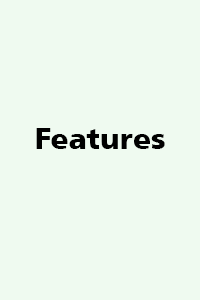
<style>
.page{position:relative;width:200px;height:300px;background:#effaf0}
.page>*{position:absolute;margin:0}
.t1{font:30px "Humanist777BT-BlackB";color:#000000}
</style>
<div class="page">
<p class="t1" style="left:36px;top:128px;width:129px;height:21px">Features</p>
</div>
